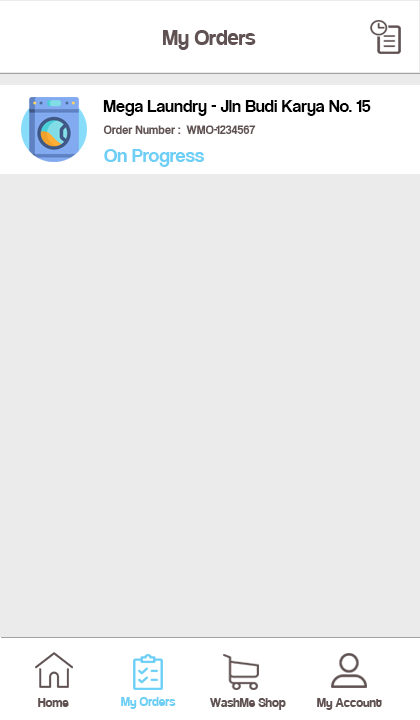
<style>
.page{position:relative;width:420px;height:720px;background:#ebebeb}
.page>*{position:absolute;margin:0}
.t1{font:24px "Coolvetica-Regular";color:#605252}
.t2{font:18px "CoolveticaRg-Regular";color:#000000}
.t3{font:13px "CoolveticaRg-Regular";color:#605252;scale:0.96 1}
.t4{font:20px "CoolveticaRg-Regular";color:#6dcff6}
.t5{font:14px "Coolvetica-Regular";color:#605252}
.t6{font:14px "Coolvetica-Regular";color:#6dcff6}
</style>
<div class="page">
<p class="t1" style="left:163px;top:30px;width:93px;height:20px">My Orders</p>
<p class="t2" style="left:103px;top:100px;width:268px;height:16px">Mega Laundry - Jln Budi Karya No. 15</p>
<p class="t3" style="left:103px;top:125px;width:153px;height:9px">Order Number :  WMO-1234567</p>
<p class="t4" style="left:104px;top:149px;width:100px;height:18px">On Progress</p>
<p class="t5" style="left:38px;top:698px;width:31px;height:9px">Home</p>
<p class="t6" style="left:121px;top:697px;width:55px;height:12px">My Orders</p>
<p class="t5" style="left:210px;top:698px;width:76px;height:12px">WashMe Shop</p>
<p class="t5" style="left:317px;top:698px;width:65px;height:12px">My Account</p>
</div>
